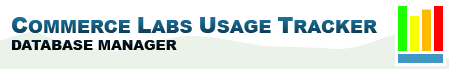
<style>
.page{position:relative;width:449px;height:69px;background:#ffffff}
.page>*{position:absolute;margin:0}
.t1{font:14px "Arial-Black"}
.t2{font:22px "Arial-Black"}
.t3{font:18px "Arial-Black"}
</style>
<div class="page">
<p class="t1" style="left:12px;top:17px;width:365px;height:33px"><span class="t2">C</span><span class="t3">OMMERCE </span><span class="t2">L</span><span class="t3">ABS </span><span class="t2">U</span><span class="t3">SAGE </span><span class="t2">T</span><span class="t3">RACKER<br></span>DATABASE MANAGER</p>
</div>
